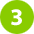
<style>
.page{position:relative;width:34px;height:34px;background:#89cc00}
.page>*{position:absolute;margin:0}
.t1{font:24px "MyriadPro-Bold";color:#ffffff}
</style>
<div class="page">
<p class="t1" style="left:11px;top:9px;width:11px;height:17px">3</p>
</div>
